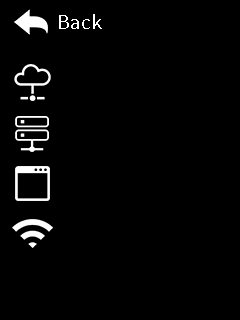
<style>
.page{position:relative;width:240px;height:320px;background:#000000}
.page>*{position:absolute;margin:0}
.t1{font:19px "TaipeiSansTCBeta-Regular";color:#ffffff}
</style>
<div class="page">
<p class="t1" style="left:59px;top:14px;width:43px;height:15px">Back</p>
</div>
